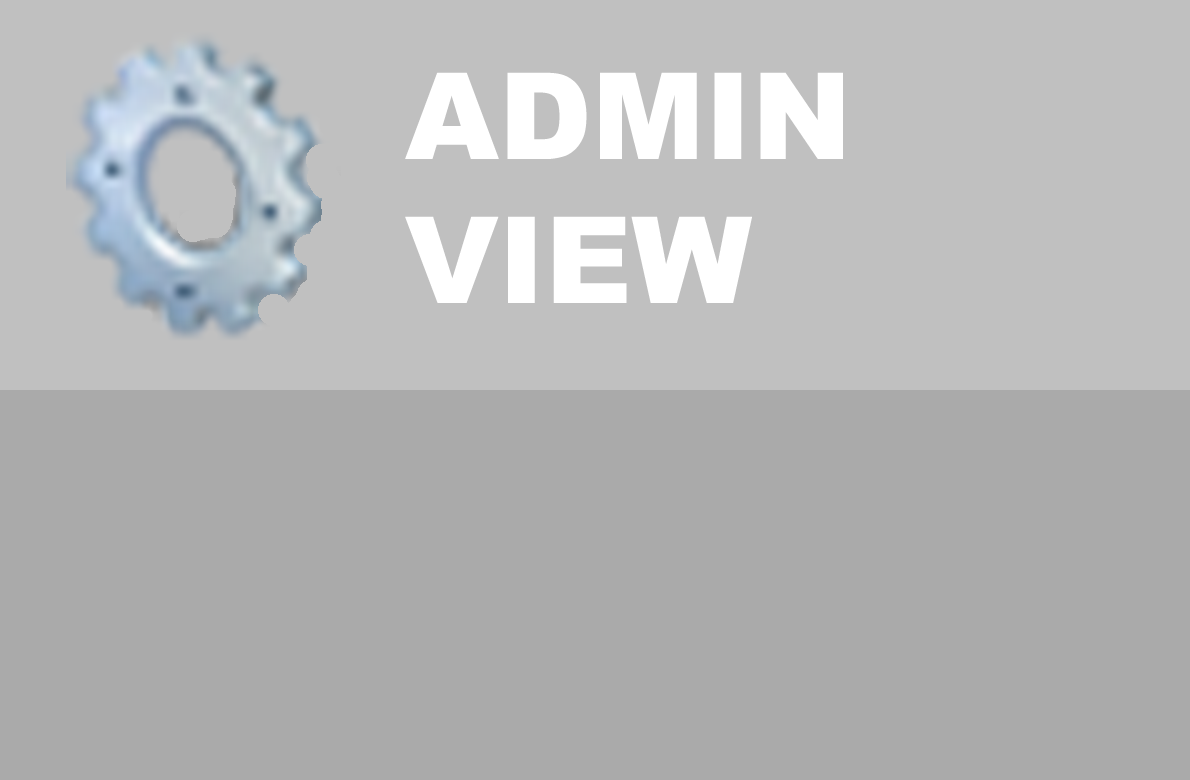
<style>
.page{position:relative;width:1190px;height:780px;background:#aaaaaa}
.page>*{position:absolute;margin:0}
.t1{font:120px "Arial-Black";color:#ffffff}
</style>
<div class="page">
<p class="t1" style="left:405px;top:72px;width:438px;height:231px">ADMIN<br>VIEW</p>
</div>
